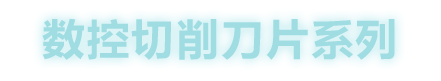
<style>
.page{position:relative;width:441px;height:81px;background:#ffffff}
.page>*{position:absolute;margin:0}
.t1{font:44.8px "FZLTCHJW--GB1-0";color:#a0dde3;text-transform:uppercase}
</style>
<div class="page">
<p class="t1" style="left:42px;top:18px;width:353px;height:42px">数控切削刀片系列</p>
</div>
